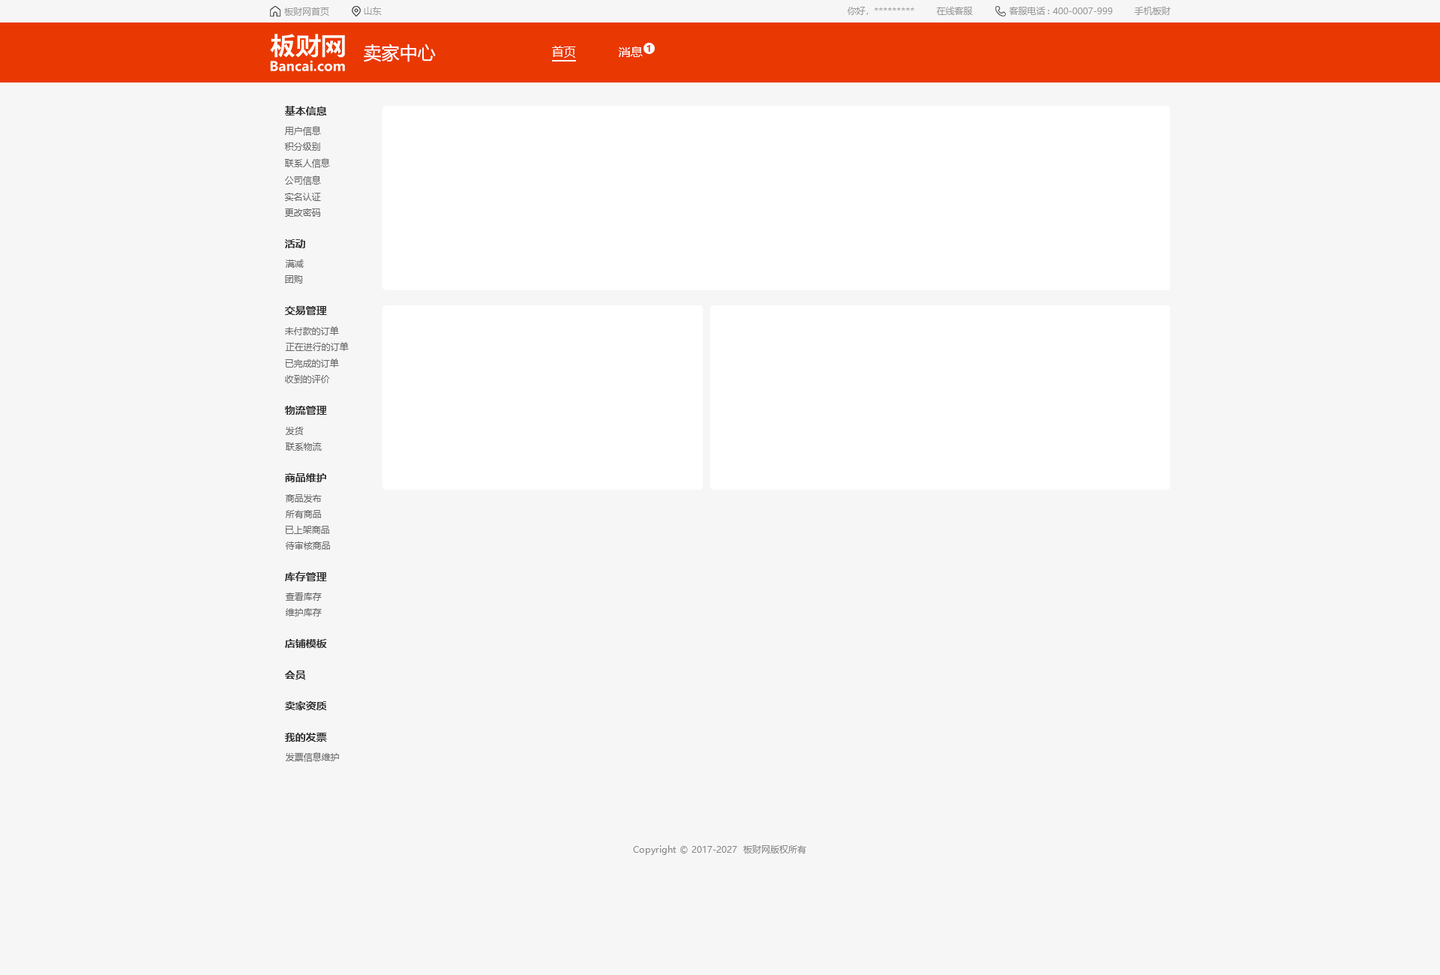
<style>
.page{position:relative;width:1440px;height:975px;background:#f6f6f6}
.page>*{position:absolute;margin:0}
.t1{font:9px "MicrosoftYaHei";color:#999999}
.t2{font:18px "MicrosoftYaHei";color:#ffffff}
.t3{font:12px "MicrosoftYaHei";color:#ffffff}
.t4{font:9px "MicrosoftYaHei-Bold";color:#ea3802}
.t5{font:10.5px "MicrosoftYaHei-Bold";color:#333333}
.t6{font:9px "MicrosoftYaHei";color:#666666}
.t7{font:9px "MicrosoftYaHei";color:#888888}
</style>
<div class="page">
<p class="t1" style="left:284px;top:8px;width:45px;height:8px">板财网首页</p>
<p class="t1" style="left:364px;top:7px;width:18px;height:8px">山东</p>
<p class="t1" style="left:848px;top:7px;width:66px;height:8px">你好，*********</p>
<p class="t1" style="left:937px;top:7px;width:36px;height:8px">在线客服</p>
<p class="t1" style="left:1009px;top:7px;width:103px;height:8px">客服电话: 400-0007-999</p>
<p class="t1" style="left:1134px;top:7px;width:37px;height:8px">手机板财</p>
<p class="t2" style="left:364px;top:44px;width:72px;height:18px">卖家中心</p>
<p class="t3" style="left:552px;top:46px;width:24px;height:12px">首页</p>
<p class="t3" style="left:619px;top:46px;width:24px;height:11px">消息</p>
<p class="t4" style="left:646px;top:45px;width:4px;height:7px">1</p>
<p class="t5" style="left:285px;top:106px;width:42px;height:10px">基本信息</p>
<p class="t6" style="left:285px;top:126px;width:36px;height:10px">用户信息</p>
<p class="t6" style="left:284px;top:142px;width:36px;height:9px">积分级别</p>
<p class="t6" style="left:285px;top:158px;width:45px;height:10px">联系人信息</p>
<p class="t6" style="left:285px;top:176px;width:36px;height:9px">公司信息</p>
<p class="t6" style="left:285px;top:193px;width:36px;height:8px">实名认证</p>
<p class="t6" style="left:285px;top:208px;width:36px;height:9px">更改密码</p>
<p class="t5" style="left:285px;top:239px;width:20px;height:9px">活动</p>
<p class="t6" style="left:285px;top:260px;width:19px;height:8px">满减</p>
<p class="t6" style="left:285px;top:275px;width:17px;height:9px">团购</p>
<p class="t5" style="left:285px;top:306px;width:42px;height:9px">交易管理</p>
<p class="t6" style="left:285px;top:326px;width:54px;height:9px">未付款的订单</p>
<p class="t6" style="left:285px;top:342px;width:64px;height:9px">正在进行的订单</p>
<p class="t6" style="left:285px;top:358px;width:54px;height:10px">已完成的订单</p>
<p class="t6" style="left:285px;top:375px;width:45px;height:8px">收到的评价</p>
<p class="t5" style="left:285px;top:406px;width:42px;height:9px">物流管理</p>
<p class="t6" style="left:286px;top:427px;width:18px;height:8px">发货</p>
<p class="t6" style="left:286px;top:442px;width:36px;height:9px">联系物流</p>
<p class="t5" style="left:285px;top:473px;width:41px;height:9px">商品维护</p>
<p class="t6" style="left:285px;top:494px;width:37px;height:8px">商品发布</p>
<p class="t6" style="left:286px;top:510px;width:35px;height:8px">所有商品</p>
<p class="t6" style="left:285px;top:526px;width:44px;height:8px">已上架商品</p>
<p class="t6" style="left:286px;top:542px;width:44px;height:8px">待审核商品</p>
<p class="t5" style="left:285px;top:572px;width:42px;height:9px">库存管理</p>
<p class="t6" style="left:286px;top:592px;width:36px;height:9px">查看库存</p>
<p class="t6" style="left:286px;top:608px;width:36px;height:8px">维护库存</p>
<p class="t5" style="left:285px;top:639px;width:42px;height:9px">店铺模板</p>
<p class="t5" style="left:285px;top:670px;width:21px;height:10px">会员</p>
<p class="t5" style="left:285px;top:701px;width:42px;height:9px">卖家资质</p>
<p class="t5" style="left:284px;top:733px;width:43px;height:9px">我的发票</p>
<p class="t6" style="left:286px;top:752px;width:53px;height:10px">发票信息维护</p>
<p class="t7" style="left:633px;top:845px;width:173px;height:10px">Copyright © 2017-2027  板财网版权所有</p>
</div>
